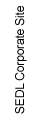
<style>
.page{position:relative;width:35px;height:117px;background:#ffffff}
.page>*{position:absolute;margin:0}
.t1{font:12px "ArialMT";letter-spacing:-0.015em;color:#000000}
</style>
<div class="page">
<p class="t1" style="left:15px;top:6px;width:14px;height:108px;rotate:-90deg">SEDL Corporate Site</p>
</div>
